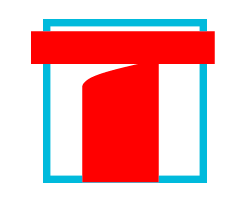
<style>
.page{position:relative;width:241px;height:209px;background:#ffffff}
.page>*{position:absolute;margin:0}
.t1{font:241.2px "Interdiction";color:#ff0000}
</style>
<div class="page">
<p class="t1" style="left:31px;top:31px;width:184px;height:152px">T</p>
</div>
